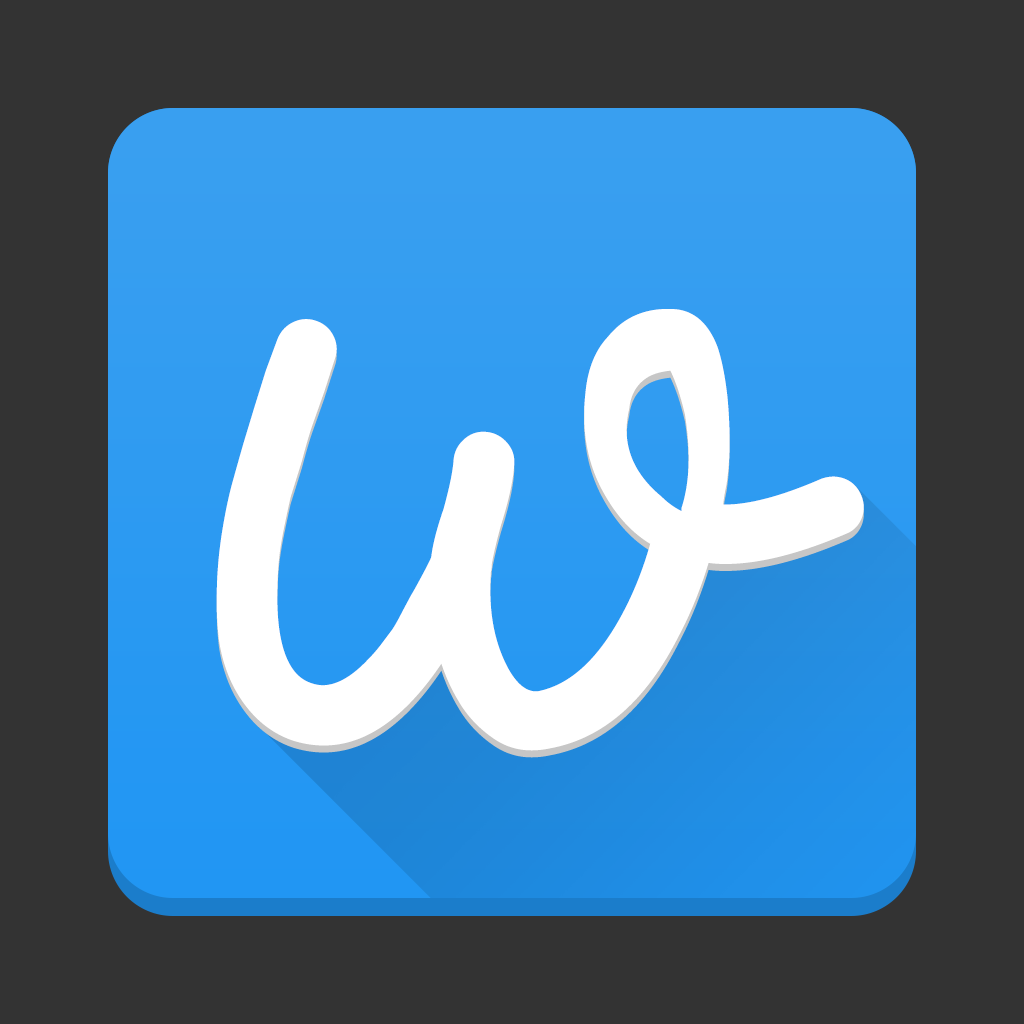
<style>
.page{position:relative;width:1024px;height:1024px;background:#333333}
.page>*{position:absolute;margin:0}
.t1{font:1117.4px "AlwaysInMyHeart";color:#ffffff}
</style>
<div class="page">
<p class="t1" style="left:216px;top:309px;width:648px;height:442px">w</p>
</div>
